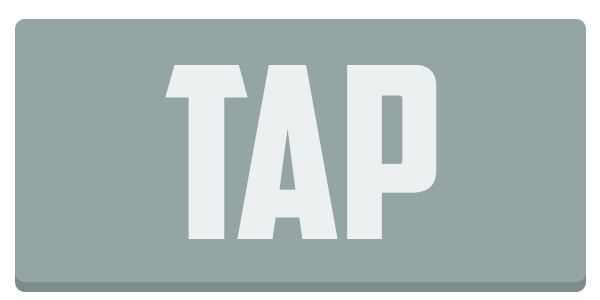
<style>
.page{position:relative;width:600px;height:300px;background:#95a5a6}
.page>*{position:absolute;margin:0}
.t1{font:240px "AmericanCaptain";color:#ecf0f1}
</style>
<div class="page">
<p class="t1" style="left:165px;top:65px;width:272px;height:174px">tap</p>
</div>
